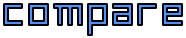
<style>
.page{position:relative;width:186px;height:38px;background:#ffffff}
.page>*{position:absolute;margin:0}
.t1{font:40px "AMOceanus-Bold"}
</style>
<div class="page">
<p class="t1" style="left:4px;top:4px;width:178px;height:31px">c o m p a r e</p>
</div>
